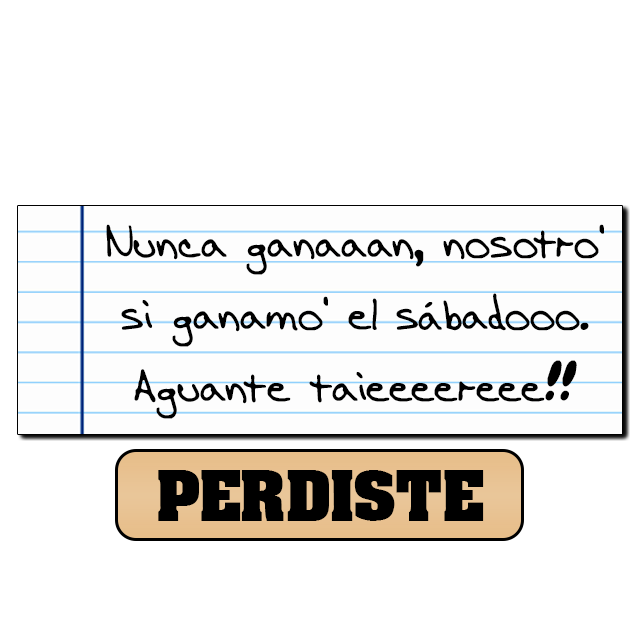
<style>
.page{position:relative;width:640px;height:640px;background:#ffffff}
.page>*{position:absolute;margin:0}
.t1{font:48px/72px "AEnigmaScrawl4BRK";color:#000000}
.t2{font:60px "AardvarkBold";color:#000000}
</style>
<div class="page">
<p class="t1" style="left:106px;top:224px;width:498px;height:195px;text-align:center">Nunca ganaaan, nosotro'<br>si ganamo' el sábadooo.<br>Aguante taieeeereee!!</p>
<p class="t2" style="left:158px;top:470px;width:326px;height:51px">PERDISTE</p>
</div>
